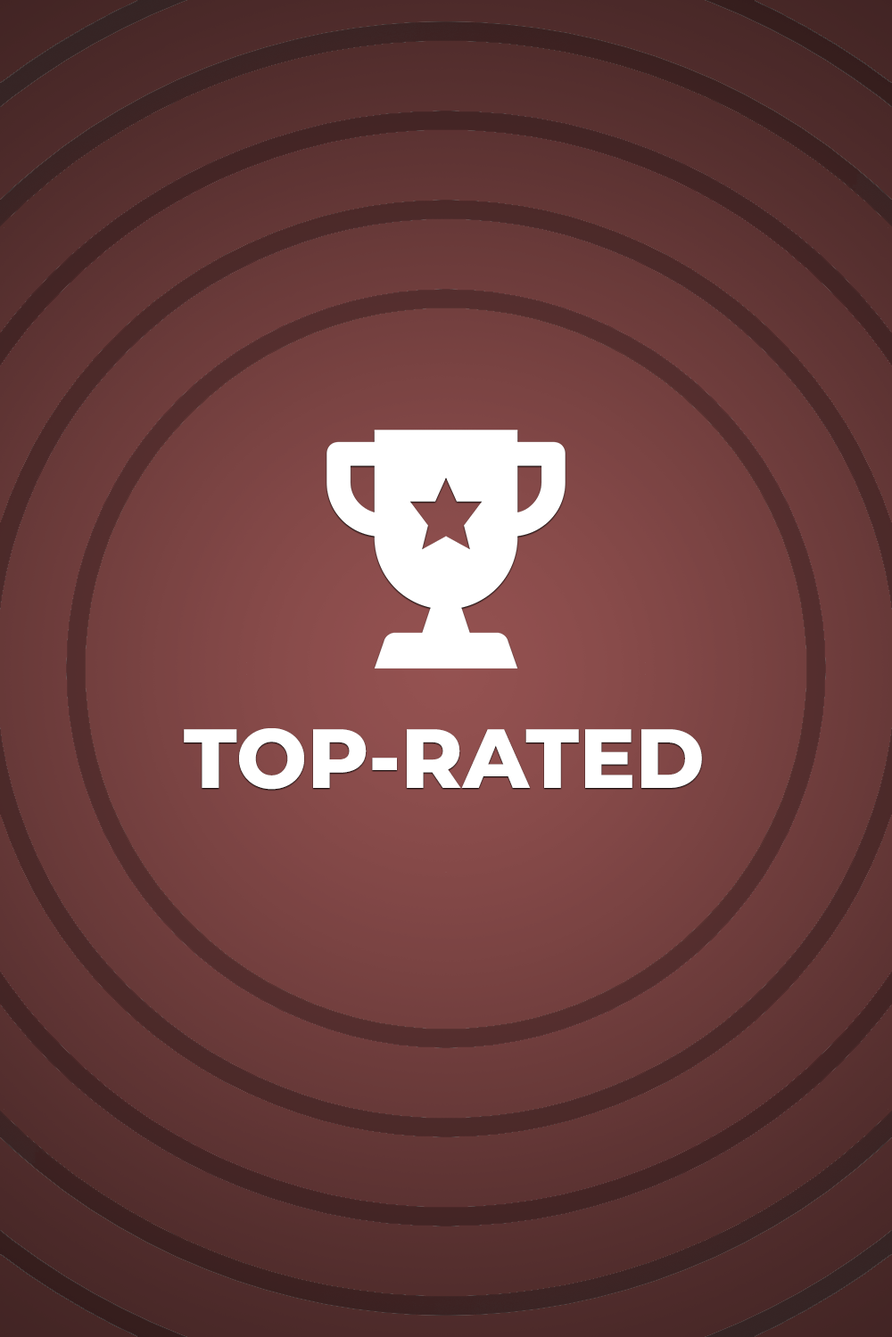
<style>
.page{position:relative;width:892px;height:1337px}
.page>*{position:absolute;margin:0}
.t1{font:83.8px "MontserratRoman-ExtraBold";color:#ffffff}
</style>
<div class="page">
<p class="t1" style="left:184px;top:728px;width:518px;height:62px">TOP-RATED</p>
</div>
